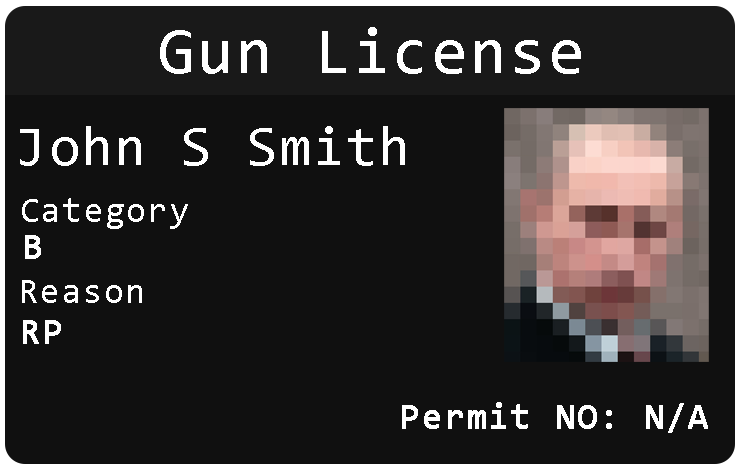
<style>
.page{position:relative;width:740px;height:470px;background:#101010}
.page>*{position:absolute;margin:0}
.t1{font:66px "Consolas";letter-spacing:0.04em;color:#ffffff}
.t2{font:56px "Consolas";letter-spacing:0.04em;color:#ffffff}
.t3{font:36px "Consolas";letter-spacing:0.04em;color:#ffffff}
.t4{font:36px "Consolas";letter-spacing:0.04em;color:#ffffff;font-weight:bold}
</style>
<div class="page">
<p class="t1" style="left:160px;top:27px;width:421px;height:47px">Gun License</p>
<p class="t2" style="left:20px;top:126px;width:385px;height:40px">John S Smith</p>
<p class="t3" style="left:22px;top:198px;width:166px;height:31px">Category</p>
<p class="t4" style="left:25px;top:235px;width:16px;height:24px">B</p>
<p class="t3" style="left:22px;top:280px;width:120px;height:23px">Reason</p>
<p class="t4" style="left:23px;top:320px;width:38px;height:24px">RP</p>
<p class="t4" style="left:402px;top:402px;width:306px;height:31px">Permit NO: N/A</p>
</div>
